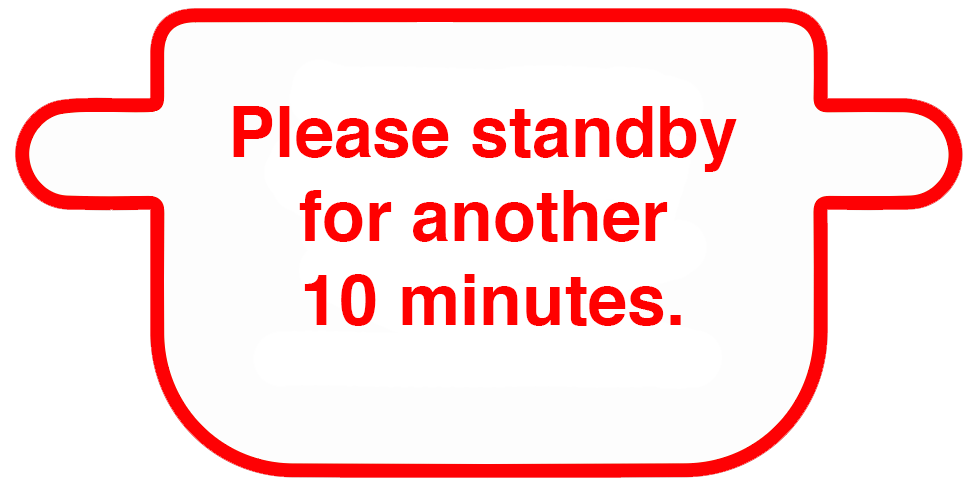
<style>
.page{position:relative;width:976px;height:485px;background:#ffffff}
.page>*{position:absolute;margin:0}
.t1{font:70px "Helvetica-Bold";color:#ff0000}
</style>
<div class="page">
<p class="t1" style="left:233px;top:106px;width:504px;height:220px;text-align:center">Please standby <br>for another <br>10 minutes.</p>
</div>
